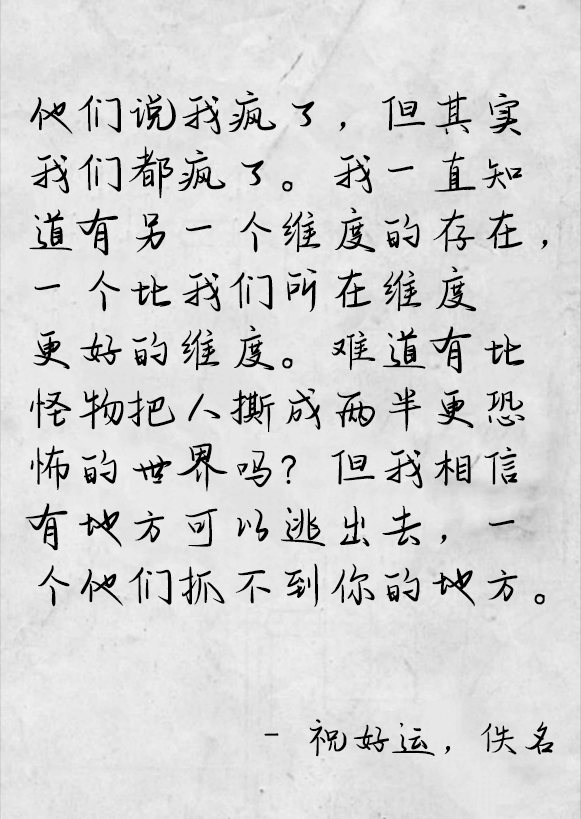
<style>
.page{position:relative;width:581px;height:819px}
.page>*{position:absolute;margin:0}
.t1{font:49.2px "zihun51hao-qingqingziyinti";color:#000000;font-weight:bold}
.t2{font:41.5px "zihun51hao-qingqingziyinti";color:#000000;font-weight:bold}
</style>
<div class="page">
<p class="t1" style="left:25px;top:90px;width:523px;height:517px">他们说我疯了，但其实<br>我们都疯了。我一直知<br>道有另一个维度的存在，<br>一个比我们所在维度<br>更好的维度。难道有比<br>怪物把人撕成两半更恐<br>怖的世界吗？但我相信<br>有地方可以逃出去，一<br>个他们抓不到你的地方。</p>
<p class="t2" style="left:264px;top:719px;width:290px;height:38px">- 祝好运，佚名</p>
</div>
